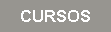
<style>
.page{position:relative;width:111px;height:32px;background:#979590}
.page>*{position:absolute;margin:0}
.t1{font:17px "Arial-BoldMT";color:#ffffff}
</style>
<div class="page">
<p class="t1" style="left:21px;top:10px;width:69px;height:12px">CURSOS</p>
</div>
